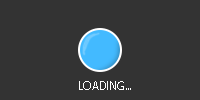
<style>
.page{position:relative;width:200px;height:100px;background:#333333}
.page>*{position:absolute;margin:0}
.t1{font:12px "MyriadPro-Regular";color:#ffffff}
</style>
<div class="page">
<p class="t1" style="left:79px;top:81px;width:52px;height:9px">LOADING...</p>
</div>
